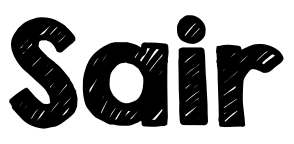
<style>
.page{position:relative;width:294px;height:144px;background:#ffffff}
.page>*{position:absolute;margin:0}
.t1{font:125px "KGSecondChancesSketch";color:#000000;font-weight:bold}
</style>
<div class="page">
<p class="t1" style="left:9px;top:15px;width:275px;height:114px">Sair</p>
</div>
